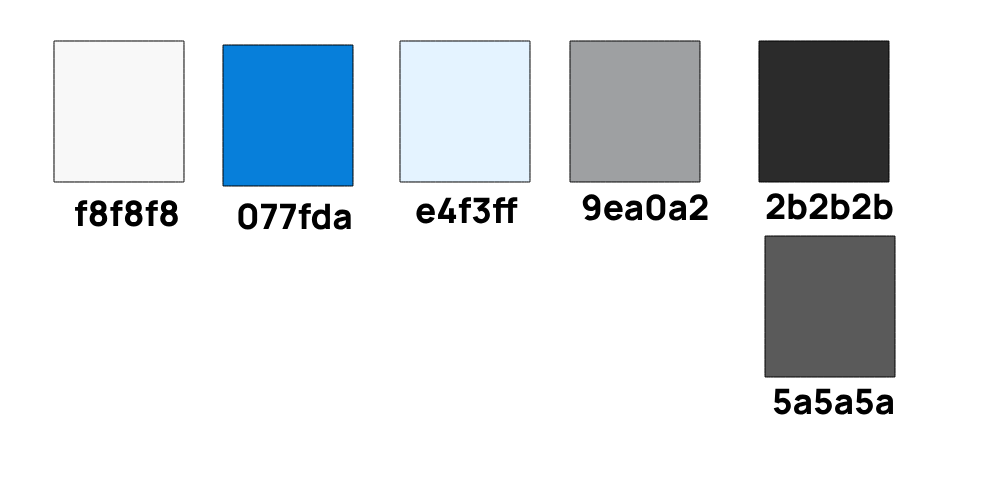
<style>
.page{position:relative;width:1000px;height:500px;background:#ffffff}
.page>*{position:absolute;margin:0}
.t1{font:35px "Manrope-ExtraBold";color:#000000}
</style>
<div class="page">
<p class="t1" style="left:416px;top:197px;width:102px;height:27px">e4f3ff</p>
<p class="t1" style="left:582px;top:194px;width:126px;height:27px">9ea0a2</p>
<p class="t1" style="left:766px;top:193px;width:127px;height:27px">2b2b2b</p>
<p class="t1" style="left:75px;top:200px;width:103px;height:27px">f8f8f8</p>
<p class="t1" style="left:238px;top:203px;width:113px;height:27px">077fda</p>
<p class="t1" style="left:773px;top:388px;width:120px;height:27px">5a5a5a</p>
</div>
